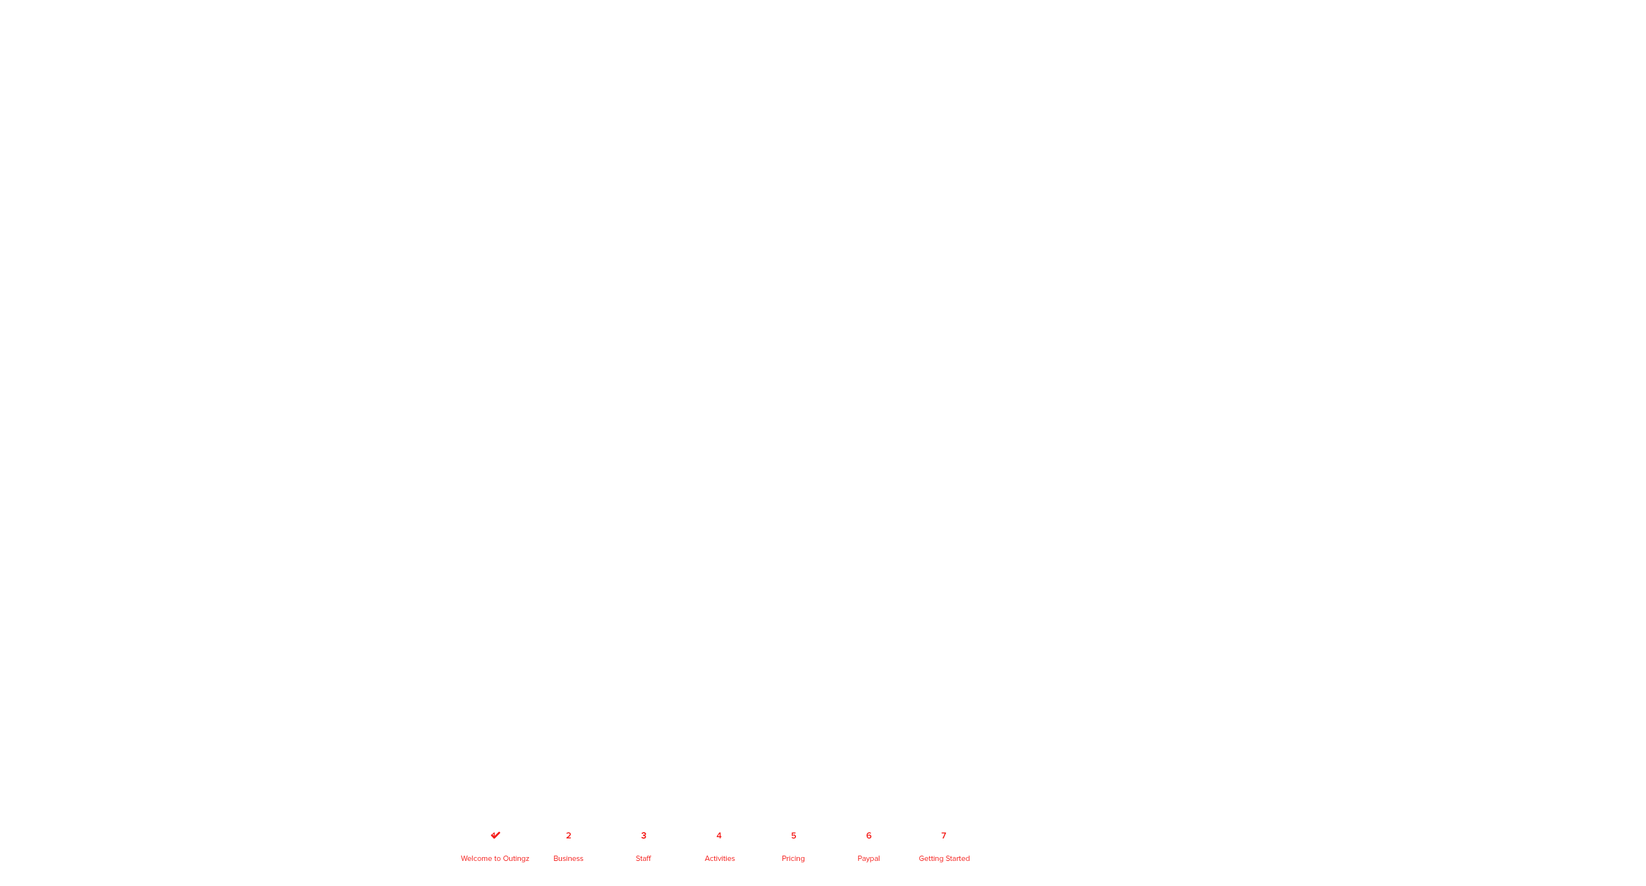
<style>
.page{position:relative;width:1646px;height:886px;background:#ffffff}
.page>*{position:absolute;margin:0}
.t1{font:9px "ProximaNova-Semibold";color:#f41e1b}
.t2{font:7.7px "ProximaNova-Regular";color:#f41e1b}
.t3{font:7.7px "ProximaNova-Regular"}
</style>
<div class="page">
<p class="t1" style="left:492px;top:832px;width:3px;height:6px">1</p>
<p class="t1" style="left:566px;top:832px;width:5px;height:6px">2</p>
<p class="t1" style="left:641px;top:832px;width:5px;height:7px">3</p>
<p class="t1" style="left:641px;top:832px;width:5px;height:7px">3</p>
<p class="t1" style="left:716px;top:832px;width:5px;height:6px">4</p>
<p class="t1" style="left:791px;top:832px;width:5px;height:7px">5</p>
<p class="t1" style="left:866px;top:832px;width:6px;height:7px">6</p>
<p class="t1" style="left:941px;top:832px;width:5px;height:6px">7</p>
<p class="t2" style="left:461px;top:855px;width:68px;height:8px">Welcome to Outingz</p>
<p class="t2" style="left:554px;top:855px;width:29px;height:6px">Business</p>
<p class="t2" style="left:636px;top:855px;width:15px;height:6px">Staff</p>
<p class="t2" style="left:705px;top:855px;width:30px;height:6px">Activities</p>
<p class="t2" style="left:782px;top:855px;width:22px;height:8px">Pricing</p>
<p class="t3" style="left:858px;top:855px;width:21px;height:8px">Paypal</p>
<p class="t2" style="left:919px;top:855px;width:50px;height:8px">Getting Started</p>
</div>
